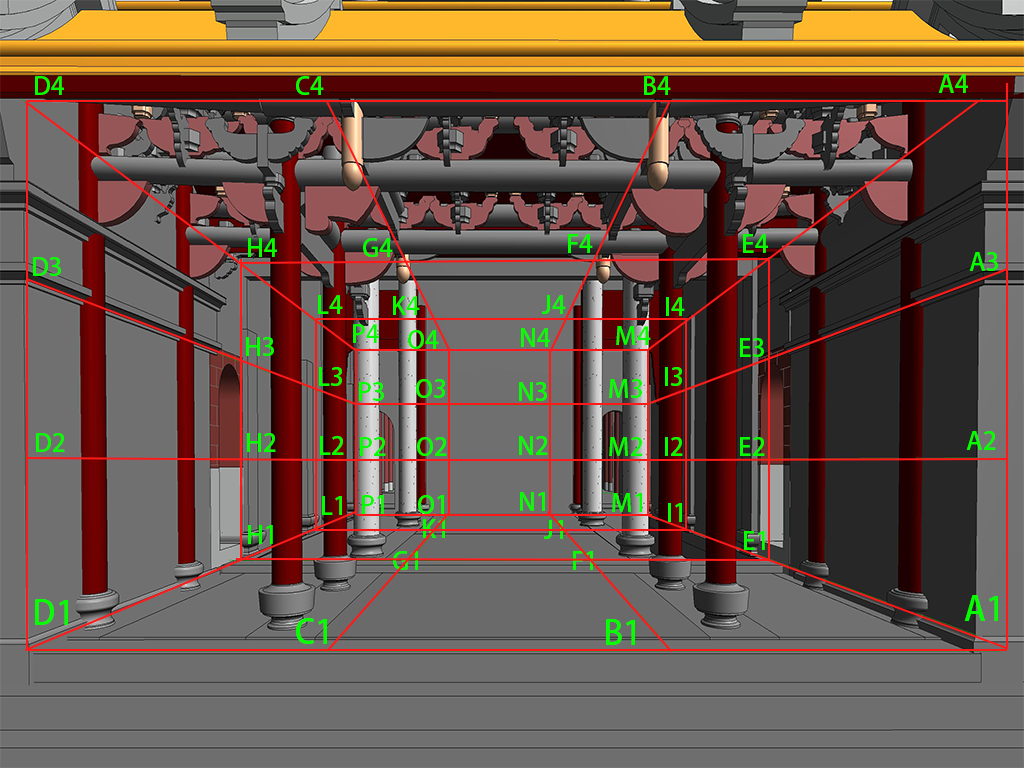
<style>
.page{position:relative;width:1024px;height:768px}
.page>*{position:absolute;margin:0}
.t1{font:25px "AdobeFanHeitiStd-Bold";color:#06ff00}
.t2{font:33.3px "AdobeFanHeitiStd-Bold";color:#06ff00}
</style>
<div class="page">
<p class="t1" style="left:35px;top:76px;width:29px;height:19px">D4</p>
<p class="t1" style="left:296px;top:76px;width:28px;height:19px">C4</p>
<p class="t1" style="left:644px;top:76px;width:27px;height:19px">B4</p>
<p class="t1" style="left:938px;top:74px;width:30px;height:19px">A4</p>
<p class="t1" style="left:248px;top:238px;width:29px;height:19px">H4</p>
<p class="t1" style="left:363px;top:238px;width:30px;height:19px">G4</p>
<p class="t1" style="left:568px;top:234px;width:25px;height:19px">F4</p>
<p class="t1" style="left:743px;top:234px;width:25px;height:19px">E4</p>
<p class="t1" style="left:33px;top:257px;width:28px;height:19px">D3</p>
<p class="t1" style="left:969px;top:252px;width:29px;height:19px">A3</p>
<p class="t1" style="left:318px;top:295px;width:25px;height:19px">L4</p>
<p class="t1" style="left:393px;top:296px;width:27px;height:19px">K4</p>
<p class="t1" style="left:542px;top:295px;width:24px;height:19px">J4</p>
<p class="t1" style="left:666px;top:297px;width:19px;height:19px">I4</p>
<p class="t1" style="left:353px;top:324px;width:26px;height:19px">P4</p>
<p class="t1" style="left:521px;top:328px;width:29px;height:19px">N4</p>
<p class="t1" style="left:616px;top:326px;width:35px;height:19px">M4</p>
<p class="t1" style="left:246px;top:337px;width:28px;height:19px">H3</p>
<p class="t1" style="left:408px;top:330px;width:31px;height:19px">O4</p>
<p class="t1" style="left:740px;top:338px;width:24px;height:19px">E3</p>
<p class="t1" style="left:319px;top:367px;width:23px;height:19px">L3</p>
<p class="t1" style="left:665px;top:367px;width:17px;height:19px">I3</p>
<p class="t1" style="left:359px;top:382px;width:25px;height:19px">P3</p>
<p class="t1" style="left:416px;top:379px;width:29px;height:19px">O3</p>
<p class="t1" style="left:519px;top:382px;width:28px;height:19px">N3</p>
<p class="t1" style="left:609px;top:379px;width:33px;height:19px">M3</p>
<p class="t1" style="left:36px;top:433px;width:29px;height:19px">D2</p>
<p class="t1" style="left:247px;top:433px;width:29px;height:19px">H2</p>
<p class="t1" style="left:320px;top:436px;width:24px;height:19px">L2</p>
<p class="t1" style="left:360px;top:437px;width:26px;height:19px">P2</p>
<p class="t1" style="left:417px;top:437px;width:30px;height:19px">O2</p>
<p class="t1" style="left:519px;top:436px;width:29px;height:19px">N2</p>
<p class="t1" style="left:609px;top:437px;width:34px;height:19px">M2</p>
<p class="t1" style="left:665px;top:437px;width:18px;height:19px">I2</p>
<p class="t1" style="left:740px;top:437px;width:25px;height:19px">E2</p>
<p class="t1" style="left:966px;top:431px;width:30px;height:19px">A2</p>
<p class="t1" style="left:322px;top:496px;width:20px;height:19px">L1</p>
<p class="t1" style="left:362px;top:495px;width:22px;height:19px">P1</p>
<p class="t1" style="left:418px;top:495px;width:26px;height:19px">O1</p>
<p class="t1" style="left:520px;top:492px;width:25px;height:19px">N1</p>
<p class="t1" style="left:612px;top:493px;width:30px;height:19px">M1</p>
<p class="t1" style="left:668px;top:503px;width:14px;height:19px">I1</p>
<p class="t1" style="left:423px;top:519px;width:22px;height:19px">K1</p>
<p class="t1" style="left:544px;top:520px;width:19px;height:19px">J1</p>
<p class="t1" style="left:248px;top:525px;width:25px;height:19px">H1</p>
<p class="t1" style="left:744px;top:531px;width:21px;height:19px">E1</p>
<p class="t1" style="left:393px;top:551px;width:25px;height:19px">G1</p>
<p class="t1" style="left:573px;top:551px;width:20px;height:19px">F1</p>
<p class="t2" style="left:35px;top:599px;width:33px;height:26px">D1</p>
<p class="t2" style="left:964px;top:595px;width:34px;height:26px">A1</p>
<p class="t2" style="left:296px;top:618px;width:31px;height:26px">C1</p>
<p class="t2" style="left:606px;top:619px;width:29px;height:26px">B1</p>
</div>
